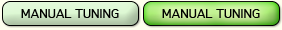
<style>
.page{position:relative;width:282px;height:30px}
.page>*{position:absolute;margin:0}
.t1{font:12px "Geneva";color:#000000}
</style>
<div class="page">
<p class="t1" style="left:21px;top:9px;width:98px;height:9px">MANUAL TUNING</p>
<p class="t1" style="left:162px;top:9px;width:98px;height:9px">MANUAL TUNING</p>
</div>
